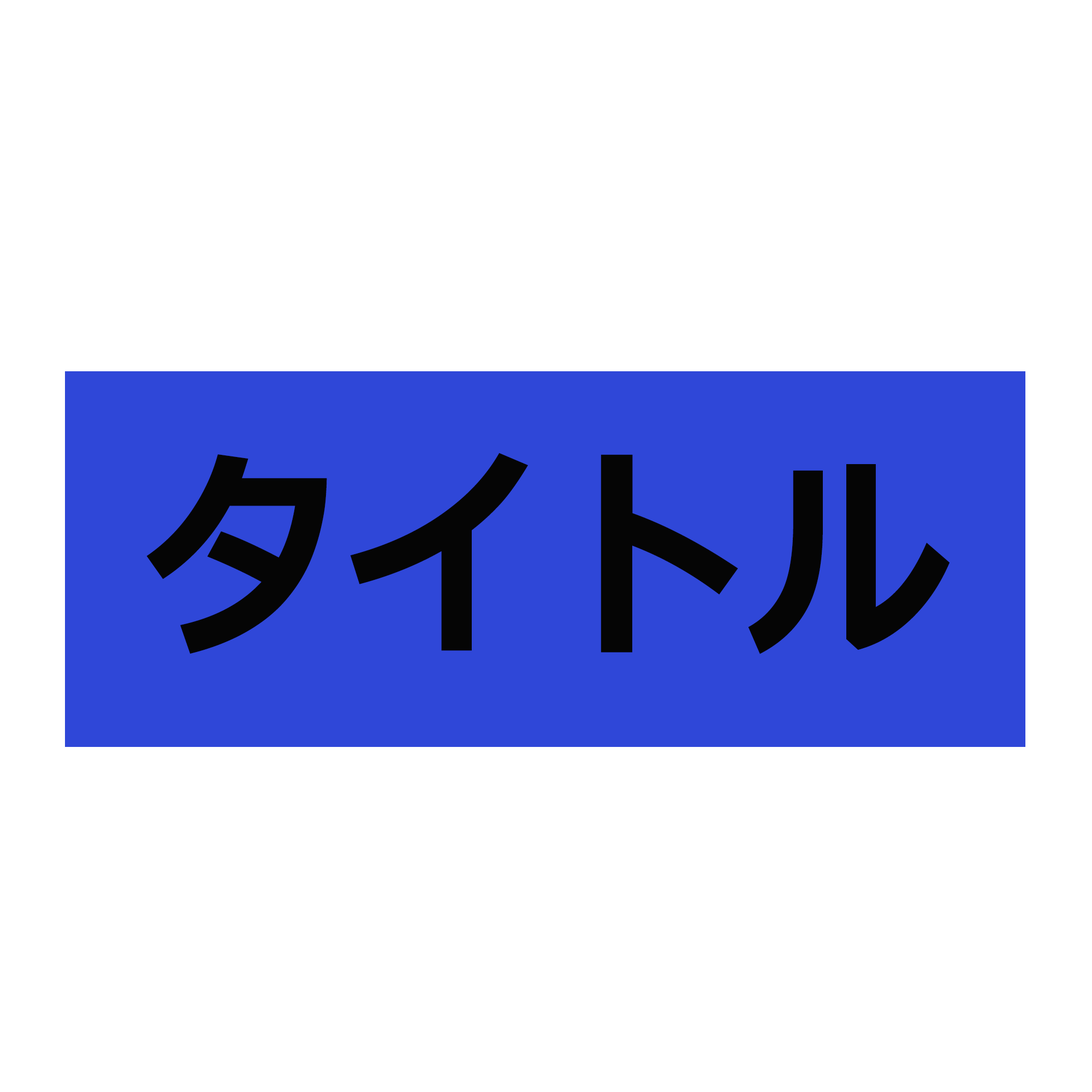
<style>
.page{position:relative;width:1092px;height:1092px;background:#ffffff}
.page>*{position:absolute;margin:0}
.t1{font:224.3px "Meiryo-Bold";color:#050505;scale:0.9 1}
</style>
<div class="page">
<p class="t1" style="left:146px;top:453px;width:804px;height:201px">タイトル</p>
</div>
